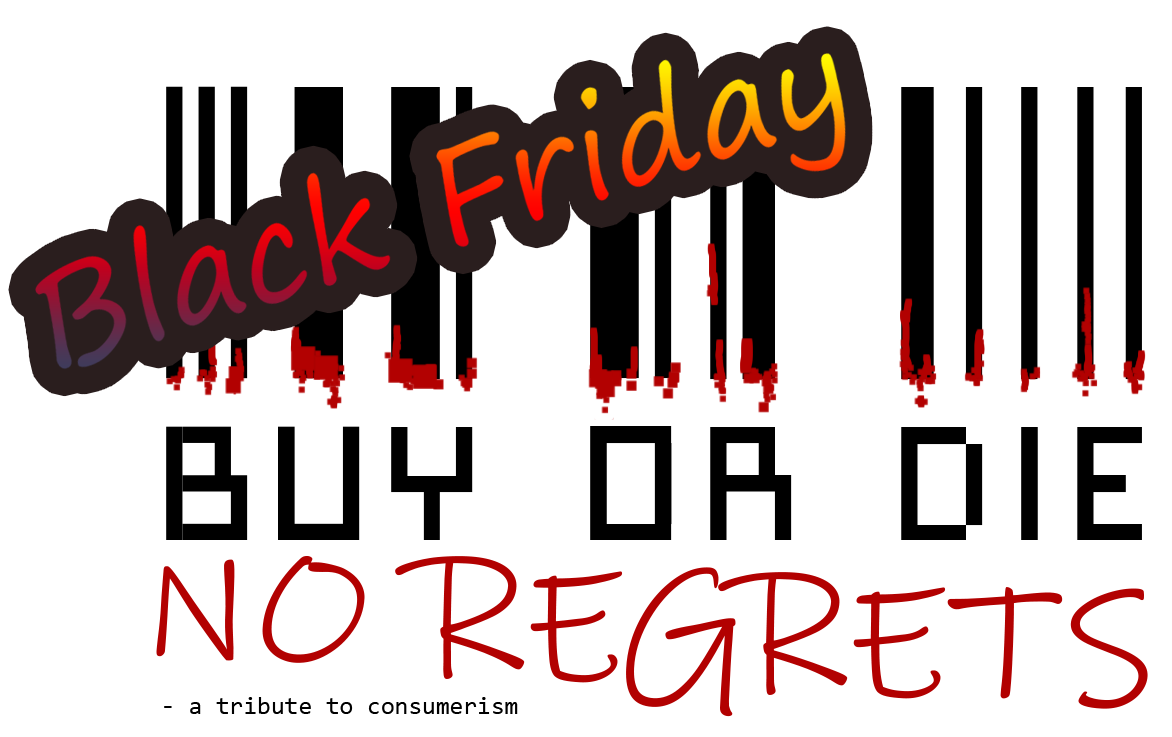
<style>
.page{position:relative;width:1172px;height:737px;background:#ffffff}
.page>*{position:absolute;margin:0}
.t1{font:420.8px "Paskowy";color:#000000}
.t2{font:166.7px "InkFree";color:#b20101}
.t3{font:25px "Consolas";color:#000000}
</style>
<div class="page">
<p class="t1" style="left:166px;top:86px;width:976px;height:454px">BUY OR DIE</p>
<p class="t2" style="left:156px;top:556px;width:992px;height:161px;rotate:3deg">NO REGRETS</p>
<p class="t3" style="left:164px;top:697px;width:354px;height:17px">- a tribute to consumerism</p>
</div>
